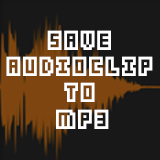
<style>
.page{position:relative;width:160px;height:160px;background:#181818}
.page>*{position:absolute;margin:0}
.t1{font:22px "Kenney-Blocks";color:#ffffff}
</style>
<div class="page">
<p class="t1" style="left:6px;top:30px;width:147px;height:99px;text-align:center">Save <br>AudioClip <br>to <br>MP3</p>
</div>
